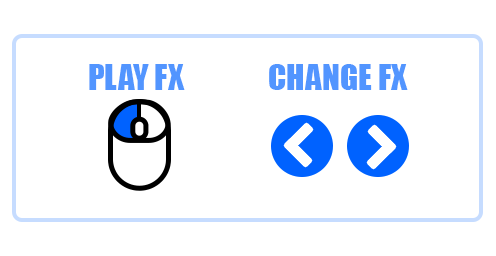
<style>
.page{position:relative;width:496px;height:256px;background:#ffffff}
.page>*{position:absolute;margin:0}
.t1{font:33.3px "Impact";color:#5295ff}
</style>
<div class="page">
<p class="t1" style="left:89px;top:64px;width:96px;height:26px">PLAY FX</p>
<p class="t1" style="left:269px;top:64px;width:139px;height:26px">CHANGE FX</p>
</div>
